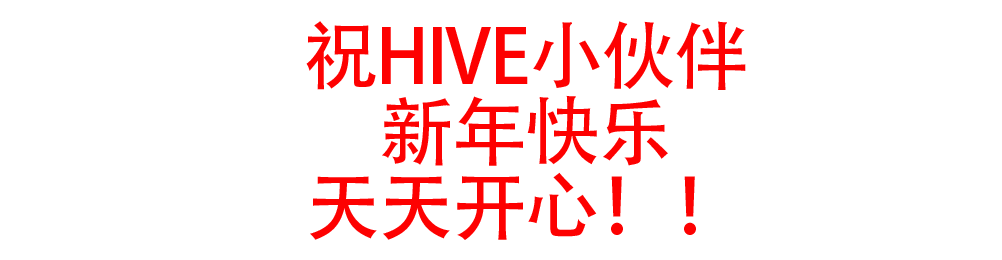
<style>
.page{position:relative;width:1002px;height:260px;background:#ffffff}
.page>*{position:absolute;margin:0}
.t1{font:75px/75px "AdobeHeitiStd-Regular";letter-spacing:-0.025em;color:#fd0101}
</style>
<div class="page">
<p class="t1" style="left:306px;top:21px;width:440px;height:219px;text-align:center">祝HIVE小伙伴<br>新年快乐<br>天天开心！！</p>
</div>
